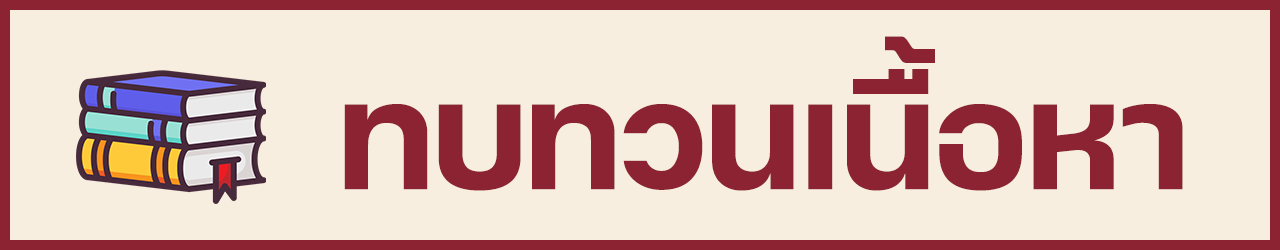
<style>
.page{position:relative;width:1280px;height:250px;background:#f8eedf}
.page>*{position:absolute;margin:0}
.t1{font:200px "FCMinimalBold";color:#8b2332}
</style>
<div class="page">
<p class="t1" style="left:344px;top:36px;width:839px;height:155px">ทบทวนเนื้อหา</p>
</div>
